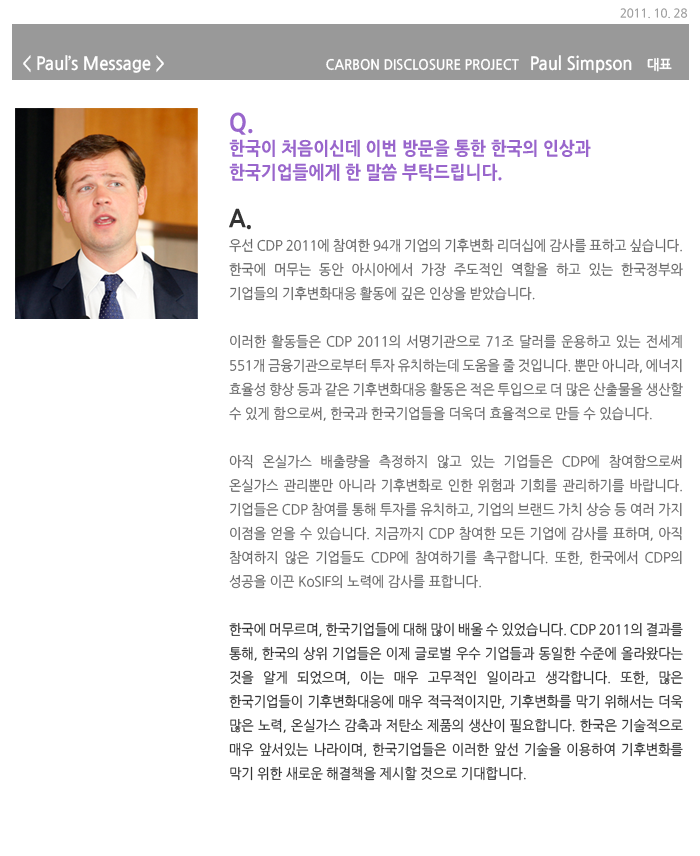
<style>
.page{position:relative;width:700px;height:856px;background:#ffffff}
.page>*{position:absolute;margin:0}
.t1{font:12px "NanumGothic";letter-spacing:-0.01em;color:#999999;scale:0.95 1}
.t2{font:18px "NanumGothicBold";letter-spacing:-0.01em;color:#ffffff;scale:0.95 1}
.t3{font:14px "NanumGothicBold";letter-spacing:-0.01em;color:#ffffff;scale:0.95 1}
.t4{font:14px/24px "NanumGothic";letter-spacing:-0.01em;color:#666666;scale:0.95 1}
.t5{font:24px/24px "NanumGothicExtraBold";letter-spacing:-0.01em;color:#9966cc;scale:0.95 1}
.t6{font:18px/24px "NanumGothicExtraBold";letter-spacing:-0.01em;color:#9966cc;scale:0.95 1}
.t7{font:24px/24px "NanumGothicExtraBold";letter-spacing:-0.01em;color:#333333;scale:0.95 1}
.t8{font:14px/24px "NanumGothic";letter-spacing:-0.01em;color:#333333;scale:0.95 1}
</style>
<div class="page">
<p class="t1" style="left:620px;top:8px;width:68px;height:11px">2011. 10. 28</p>
<p class="t2" style="left:23px;top:55px;width:141px;height:18px">&lt; Paul’s Message &gt;</p>
<p class="t3" style="left:326px;top:55px;width:346px;height:18px">CARBON DISCLOSURE PROJECT   <span class="t2">Paul Simpson</span>    대표</p>
<p class="t4" style="left:229px;top:112px;width:454px;height:669px;text-align:justify"><span class="t5">Q. <br></span><span class="t6">한국이 처음이신데 이번 방문을 통한 한국의 인상과 한국기업들에게 한 말씀 부탁드립니다.<br><br></span><span class="t7">A. <br></span>우선 CDP 2011에 참여한 94개 기업의 기후변화 리더십에 감사를 표하고 싶습니다. 한국에 머무는 동안 아시아에서 가장 주도적인 역할을 하고 있는 한국정부와 기업들의 기후변화대응 활동에 깊은 인상을 받았습니다.<br><br>이러한 활동들은 CDP 2011의 서명기관으로 71조 달러를 운용하고 있는 전세계 551개 금융기관으로부터 투자 유치하는데 도움을 줄 것입니다. 뿐만 아니라, 에너지 효율성 향상 등과 같은 기후변화대응 활동은 적은 투입으로 더 많은 산출물을 생산할 수 있게 함으로써, 한국과 한국기업들을 더욱더 효율적으로 만들 수 있습니다. <br><br>아직 온실가스 배출량을 측정하지 않고 있는 기업들은 CDP에 참여함으로써 온실가스 관리뿐만 아니라 기후변화로 인한 위험과 기회를 관리하기를 바랍니다. 기업들은 CDP 참여를 통해 투자를 유치하고, 기업의 브랜드 가치 상승 등 여러 가지 이점을 얻을 수 있습니다. 지금까지 CDP 참여한 모든 기업에 감사를 표하며, 아직 참여하지 않은 기업들도 CDP에 참여하기를 촉구합니다. 또한, 한국에서 CDP의 성공을 이끈 KoSIF의 노력에 감사를 표합니다. <br><br><span class="t8">한국에 머무르며, 한국기업들에 대해 많이 배울 수 있었습니다. CDP 2011의 결과를 통해, 한국의 상위 기업들은 이제 글로벌 우수 기업들과 동일한 수준에 올라왔다는 것을 알게 되었으며, 이는 매우 고무적인 일이라고 생각합니다. 또한, 많은 한국기업들이 기후변화대응에 매우 적극적이지만, 기후변화를 막기 위해서는 더욱 많은 노력, 온실가스 감축과 저탄소 제품의 생산이 필요합니다. 한국은 기술적으로 매우 앞서있는 나라이며, 한국기업들은 이러한 앞선 기술을 이용하여 기후변화를 막기 위한 새로운 해결책을 제시할 것으로 기대합니다.</span></p>
</div>
